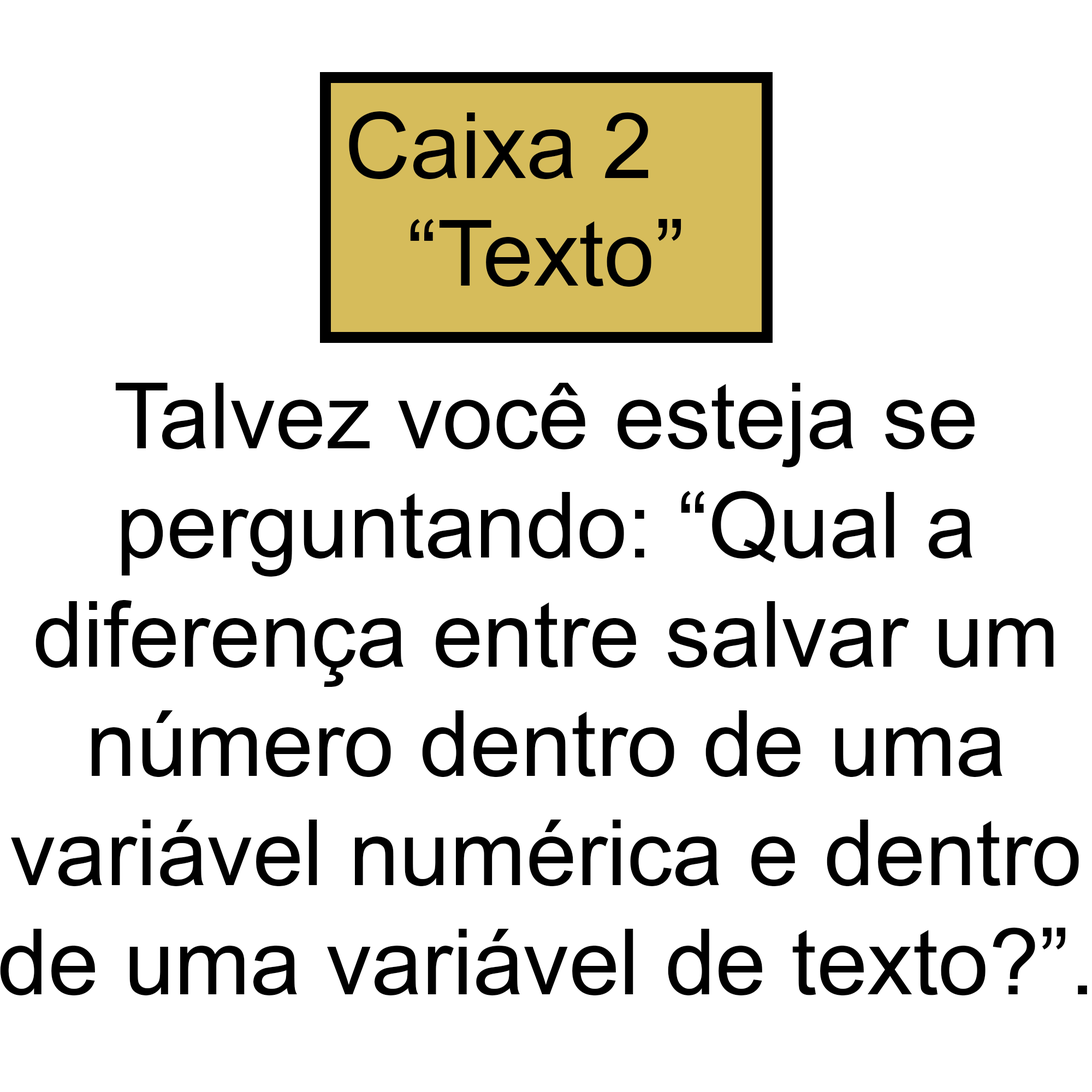
<style>
.page{position:relative;width:1092px;height:1092px;background:#ffffff}
.page>*{position:absolute;margin:0}
.t1{font:91px "ArialMT";color:#000000}
</style>
<div class="page">
<p class="t1" style="left:349px;top:111px;width:300px;height:68px">Caixa 2</p>
<p class="t1" style="left:410px;top:219px;width:271px;height:68px">“Texto”</p>
<p class="t1" style="left:0px;top:383px;width:1087px;height:612px;text-align:center">Talvez você esteja se<br>perguntando: “Qual a<br>diferença entre salvar um<br>número dentro de uma<br>variável numérica e dentro<br>de uma variável de texto?”.</p>
</div>
